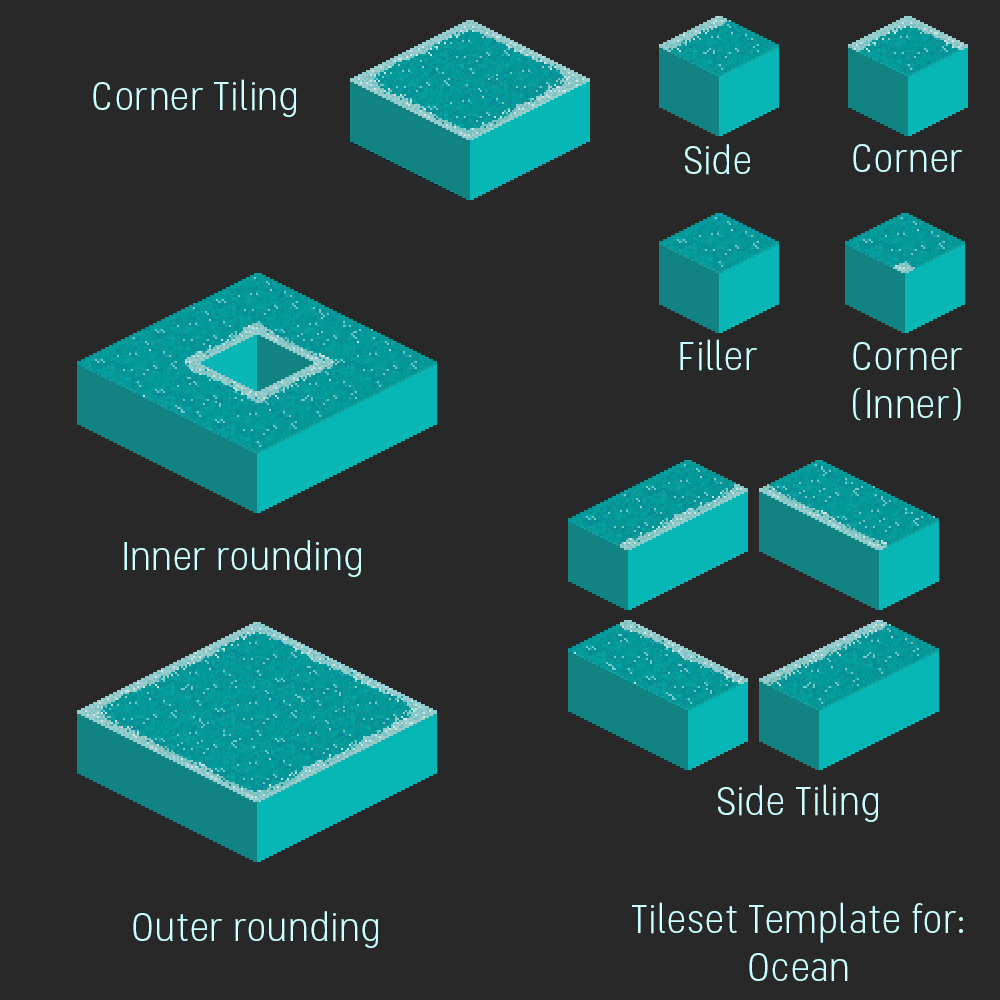
<style>
.page{position:relative;width:1000px;height:1000px;background:#282828}
.page>*{position:absolute;margin:0}
.t1{font:40px "Stellar-Light";color:#ccffff}
</style>
<div class="page">
<p class="t1" style="left:93px;top:79px;width:204px;height:38px">Corner Tiling</p>
<p class="t1" style="left:685px;top:144px;width:65px;height:31px">Side</p>
<p class="t1" style="left:853px;top:144px;width:110px;height:28px">Corner</p>
<p class="t1" style="left:680px;top:339px;width:78px;height:32px">Filler</p>
<p class="t1" style="left:853px;top:342px;width:110px;height:79px;text-align:center">Corner (Inner)</p>
<p class="t1" style="left:124px;top:540px;width:238px;height:37px">Inner rounding</p>
<p class="t1" style="left:718px;top:784px;width:161px;height:38px">Side Tiling</p>
<p class="t1" style="left:632px;top:902px;width:331px;height:79px;text-align:center">Tileset Template for:<br>Ocean</p>
<p class="t1" style="left:133px;top:911px;width:246px;height:37px">Outer rounding</p>
</div>
